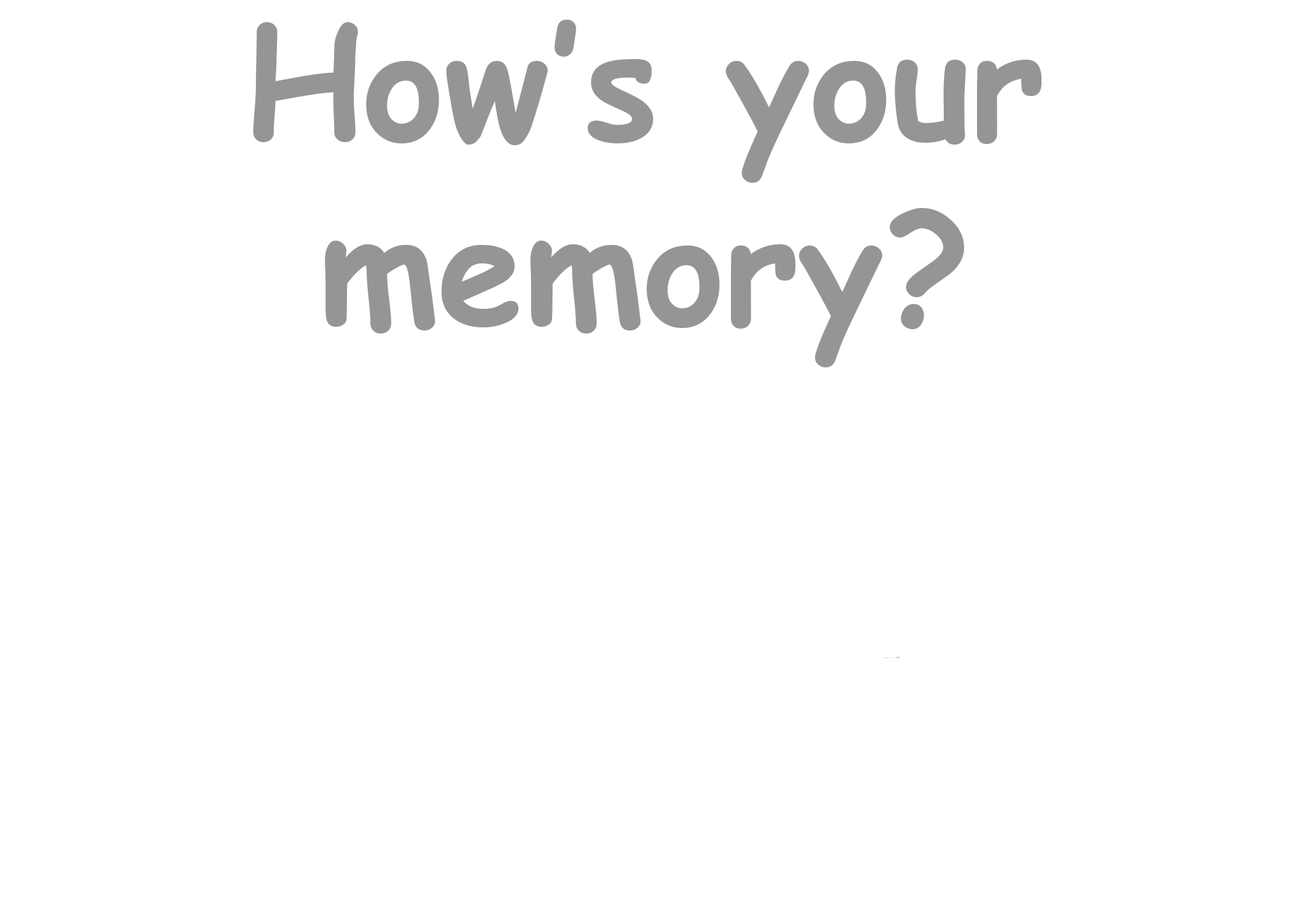
<style>
.page{position:relative;width:1292px;height:923px;background:#ffffff}
.page>*{position:absolute;margin:0}
.t1{font:153.8px "ComicSansMS-Bold";color:#959595}
</style>
<div class="page">
<p class="t1" style="left:253px;top:20px;width:789px;height:347px;text-align:center">How’s your memory?</p>
</div>
